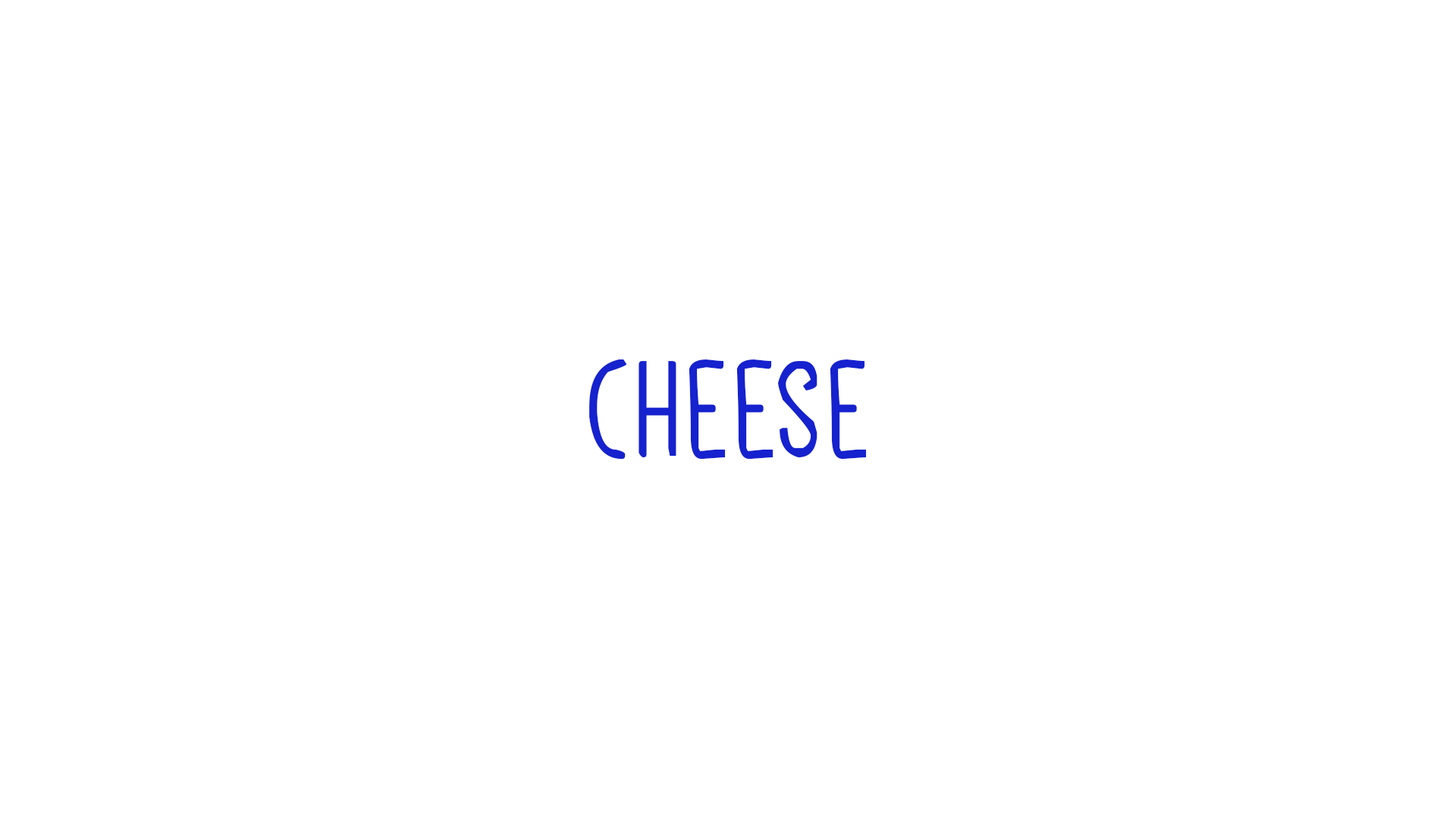
<style>
.page{position:relative;width:1456px;height:819px;background:#ffffff}
.page>*{position:absolute;margin:0}
.t1{font:113.7px "SingleStep-FreeForPersonal";color:#1522ce}
</style>
<div class="page">
<p class="t1" style="left:589px;top:359px;width:278px;height:101px">cheese</p>
</div>
